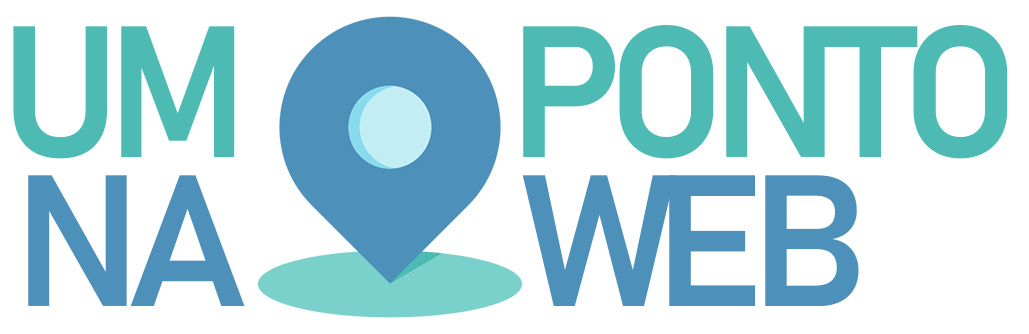
<style>
.page{position:relative;width:1029px;height:334px;background:#ffffff}
.page>*{position:absolute;margin:0}
.t1{font:183.7px "Bahnschrift-SemiBold";letter-spacing:-0.075em;color:#4dbab4;text-transform:uppercase}
.t2{font:183.7px "Bahnschrift-SemiBold";letter-spacing:-0.075em;color:#4d91bb;text-transform:uppercase}
.t3{font:183.7px "Bahnschrift-SemiBold";letter-spacing:-0.12em;color:#4d91bb;text-transform:uppercase}
</style>
<div class="page">
<p class="t1" style="left:13px;top:26px;width:222px;height:133px">Um</p>
<p class="t1" style="left:523px;top:25px;width:485px;height:134px">ponto</p>
<p class="t2" style="left:28px;top:175px;width:217px;height:131px">na</p>
<p class="t2" style="left:522px;top:175px;width:337px;height:131px"><span class="t3">w</span>eb</p>
</div>
